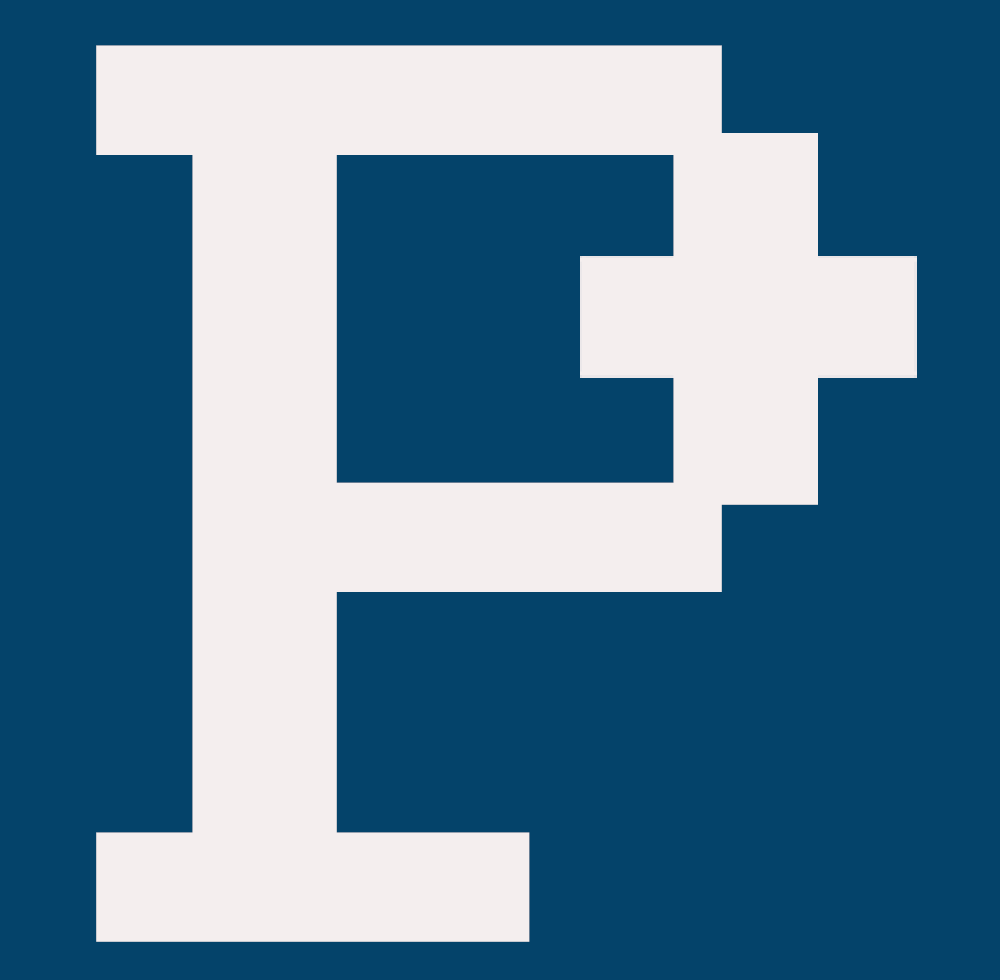
<style>
.page{position:relative;width:1000px;height:980px;background:#04436a}
.page>*{position:absolute;margin:0}
.t1{font:1399.1px "Courier";letter-spacing:0.2em;color:#f4eeee;text-transform:uppercase;font-weight:bold;scale:1.1 1}
</style>
<div class="page">
<p class="t1" style="left:96px;top:45px;width:722px;height:897px">P</p>
</div>
